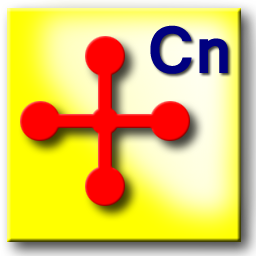
<style>
.page{position:relative;width:256px;height:256px}
.page>*{position:absolute;margin:0}
.t1{font:72px "Latha-Bold";color:#000080}
</style>
<div class="page">
<p class="t1" style="left:150px;top:25px;width:78px;height:49px">Cn</p>
</div>
